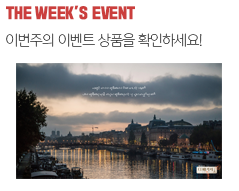
<style>
.page{position:relative;width:239px;height:191px;background:#ffffff}
.page>*{position:absolute;margin:0}
.t1{font:14.1px "SDGdGothic";color:#cb3e3c}
.t2{font:14.1px "YoonGothicPro710";color:#444444}
</style>
<div class="page">
<p class="t1" style="left:6px;top:5px;width:129px;height:15px">THE WEEK’S EVENT</p>
<p class="t2" style="left:6px;top:33px;width:196px;height:14px">이번주의 이벤트 상품을 확인하세요!</p>
</div>
